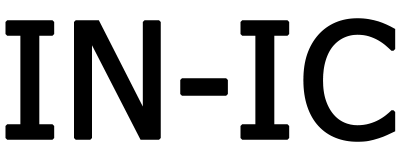
<style>
.page{position:relative;width:400px;height:150px;background:#ffffff}
.page>*{position:absolute;margin:0}
.t1{font:160.2px "Tahoma";color:#000000;font-weight:bold}
</style>
<div class="page">
<p class="t1" style="left:5px;top:18px;width:391px;height:124px">IN-IC</p>
</div>
